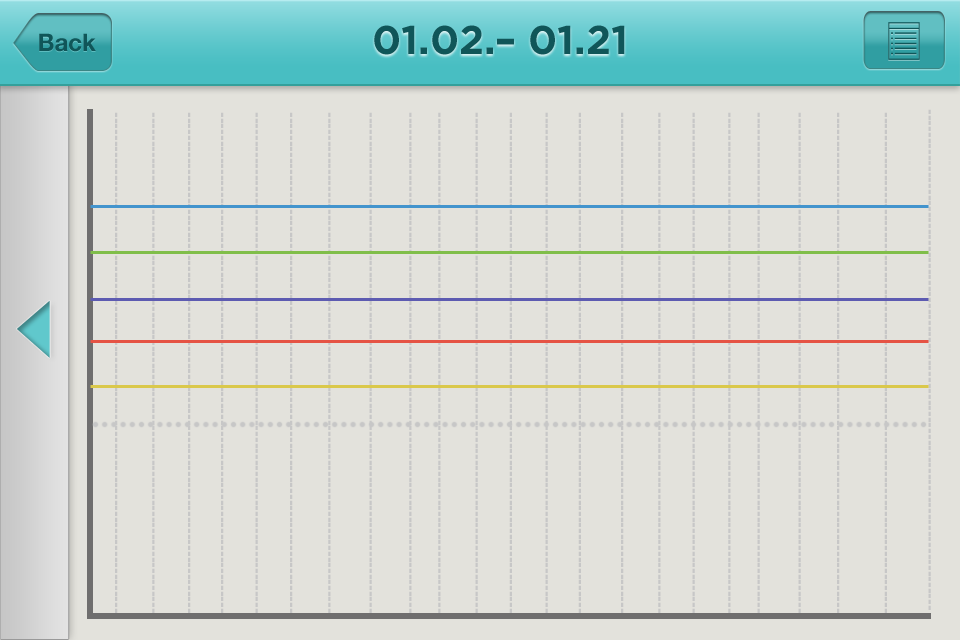
<style>
.page{position:relative;width:960px;height:640px;background:#e3e2dc}
.page>*{position:absolute;margin:0}
.t1{font:40px "Gotham-Bold";color:#105659}
.t2{font:24px "HelveticaNeue-Bold";color:#105659}
.t3{font:18.5px "HelveticaNeue-Bold";color:#c7c7c7;scale:0.75 1}
</style>
<div class="page">
<p class="t1" style="left:374px;top:25px;width:251px;height:30px">01.02.– 01.21</p>
<p class="t2" style="left:39px;top:33px;width:57px;height:19px">Back</p>
<p class="t3" style="left:115px;top:112px;width:3px;height:501px;rotate:90deg">----------------------------------------------------------------------------------------</p>
<p class="t3" style="left:152px;top:112px;width:3px;height:501px;rotate:90deg">----------------------------------------------------------------------------------------</p>
<p class="t3" style="left:188px;top:112px;width:3px;height:501px;rotate:90deg">----------------------------------------------------------------------------------------</p>
<p class="t3" style="left:221px;top:112px;width:3px;height:501px;rotate:90deg">----------------------------------------------------------------------------------------</p>
<p class="t3" style="left:255px;top:112px;width:3px;height:501px;rotate:90deg">----------------------------------------------------------------------------------------</p>
<p class="t3" style="left:290px;top:112px;width:3px;height:501px;rotate:90deg">----------------------------------------------------------------------------------------</p>
<p class="t3" style="left:328px;top:112px;width:3px;height:501px;rotate:90deg">----------------------------------------------------------------------------------------</p>
<p class="t3" style="left:369px;top:112px;width:3px;height:501px;rotate:90deg">----------------------------------------------------------------------------------------</p>
<p class="t3" style="left:409px;top:112px;width:3px;height:501px;rotate:90deg">----------------------------------------------------------------------------------------</p>
<p class="t3" style="left:438px;top:112px;width:3px;height:501px;rotate:90deg">----------------------------------------------------------------------------------------</p>
<p class="t3" style="left:475px;top:112px;width:3px;height:501px;rotate:90deg">----------------------------------------------------------------------------------------</p>
<p class="t3" style="left:509px;top:112px;width:3px;height:501px;rotate:90deg">----------------------------------------------------------------------------------------</p>
<p class="t3" style="left:545px;top:112px;width:3px;height:501px;rotate:90deg">----------------------------------------------------------------------------------------</p>
<p class="t3" style="left:578px;top:112px;width:3px;height:501px;rotate:90deg">----------------------------------------------------------------------------------------</p>
<p class="t3" style="left:621px;top:112px;width:3px;height:501px;rotate:90deg">----------------------------------------------------------------------------------------</p>
<p class="t3" style="left:658px;top:112px;width:3px;height:501px;rotate:90deg">----------------------------------------------------------------------------------------</p>
<p class="t3" style="left:692px;top:112px;width:3px;height:501px;rotate:90deg">----------------------------------------------------------------------------------------</p>
<p class="t3" style="left:728px;top:112px;width:3px;height:501px;rotate:90deg">----------------------------------------------------------------------------------------</p>
<p class="t3" style="left:757px;top:112px;width:3px;height:501px;rotate:90deg">----------------------------------------------------------------------------------------</p>
<p class="t3" style="left:798px;top:112px;width:3px;height:501px;rotate:90deg">----------------------------------------------------------------------------------------</p>
<p class="t3" style="left:837px;top:112px;width:3px;height:501px;rotate:90deg">----------------------------------------------------------------------------------------</p>
<p class="t3" style="left:884px;top:112px;width:3px;height:501px;rotate:90deg">----------------------------------------------------------------------------------------</p>
</div>
